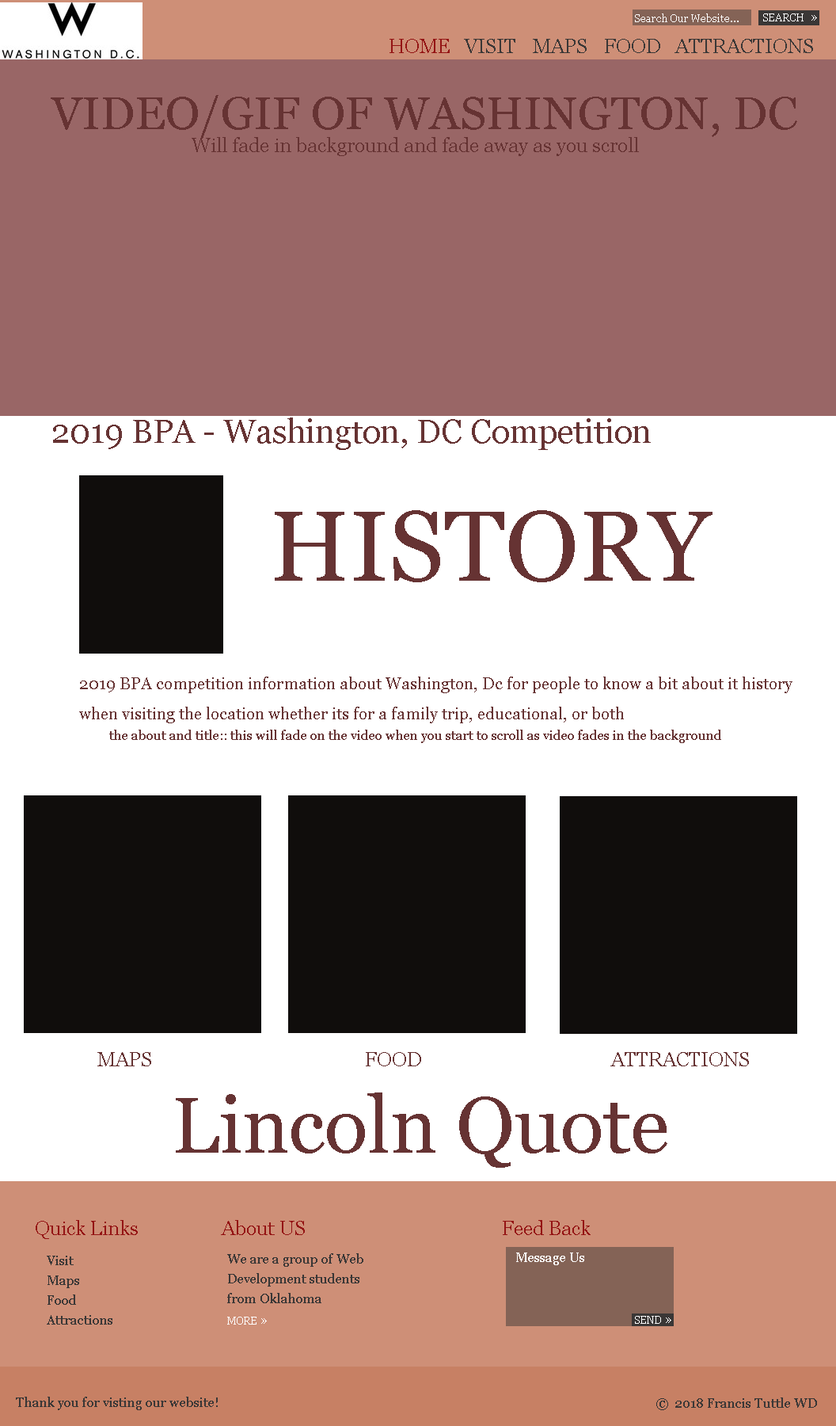
<style>
.page{position:relative;width:836px;height:1426px;background:#ffffff}
.page>*{position:absolute;margin:0}
.t1{font:9.9px "Georgia";color:#ffffff}
.t2{font:13.2px "Georgia";color:#ffffff}
.t3{font:19.8px "Georgia";color:#941414}
.t4{font:19.8px "Georgia";color:#3a3736}
.t5{font:46.2px "Georgia";color:#663333}
.t6{font:19.8px "Georgia";color:#663333}
.t7{font:33px "Georgia";color:#663333}
.t8{font:99px "Georgia";color:#663333}
.t9{font:16.5px/29.7px "Georgia";color:#663333}
.t10{font:19.8px/29.7px "Georgia";color:#663333}
.t11{font:13.2px "Georgia";color:#663333}
.t12{font:79.2px "Georgia";color:#663333}
.t13{font:13.2px/19.8px "Georgia";color:#3a3736}
.t14{font:13.2px/101.6px "Georgia";color:#3a3736}
.t15{font:13.2px "Georgia";color:#3a3736}
.t16{font:13.2px "Georgia";color:#333333}
</style>
<div class="page">
<p class="t1" style="left:635px;top:13px;width:104px;height:9px">Search Our Website...</p>
<p class="t1" style="left:764px;top:13px;width:53px;height:8px">SEARCH  <span class="t2">»</span></p>
<p class="t3" style="left:390px;top:39px;width:60px;height:14px">HOME</p>
<p class="t4" style="left:464px;top:39px;width:52px;height:14px">VISIT</p>
<p class="t4" style="left:533px;top:39px;width:54px;height:14px">MAPS</p>
<p class="t4" style="left:605px;top:39px;width:56px;height:14px">FOOD</p>
<p class="t4" style="left:675px;top:39px;width:138px;height:14px">ATTRACTIONS</p>
<p class="t5" style="left:51px;top:95px;width:747px;height:44px">VIDEO/GIF OF WASHINGTON, DC</p>
<p class="t6" style="left:192px;top:137px;width:447px;height:19px">Will fade in background and fade away as you scroll</p>
<p class="t7" style="left:53px;top:417px;width:598px;height:33px">2019 BPA - Washington, DC Competition</p>
<p class="t8" style="left:275px;top:510px;width:438px;height:72px">HISTORY</p>
<p class="t9" style="left:79px;top:676px;width:714px;height:47px"><span class="t10"><br><br></span>2019 BPA competition information about Washington, Dc for people to know a bit about it history <br>when visiting the location whether its for a family trip, educational, or both</p>
<p class="t11" style="left:109px;top:729px;width:613px;height:14px">the about and title:: this will fade on the video when you start to scroll as video fades in the background</p>
<p class="t6" style="left:97px;top:1052px;width:54px;height:14px">MAPS</p>
<p class="t6" style="left:366px;top:1052px;width:55px;height:14px">FOOD</p>
<p class="t6" style="left:611px;top:1052px;width:138px;height:14px">ATTRACTIONS</p>
<p class="t12" style="left:176px;top:1092px;width:492px;height:75px">Lincoln Quote</p>
<p class="t3" style="left:36px;top:1220px;width:102px;height:19px">Quick Links</p>
<p class="t3" style="left:221px;top:1220px;width:84px;height:15px">About US</p>
<p class="t3" style="left:503px;top:1220px;width:88px;height:15px">Feed Back</p>
<p class="t13" style="left:227px;top:1253px;width:137px;height:50px">We are a group of Web <br>Development students <br>from Oklahoma</p>
<p class="t2" style="left:516px;top:1252px;width:69px;height:13px">Message Us</p>
<p class="t13" style="left:47px;top:1255px;width:65px;height:69px"><span class="t14">Visit</span><br>Maps<br>Food<br>Attractions</p>
<p class="t1" style="left:227px;top:1316px;width:40px;height:8px">MORE <span class="t2">»</span></p>
<p class="t1" style="left:635px;top:1316px;width:37px;height:8px">SEND <span class="t2">»</span></p>
<p class="t15" style="left:16px;top:1396px;width:202px;height:14px">Thank you for visting our website!</p>
<p class="t15" style="left:657px;top:1397px;width:160px;height:13px"><span class="t16">© </span> 2018 Francis Tuttle WD</p>
</div>
